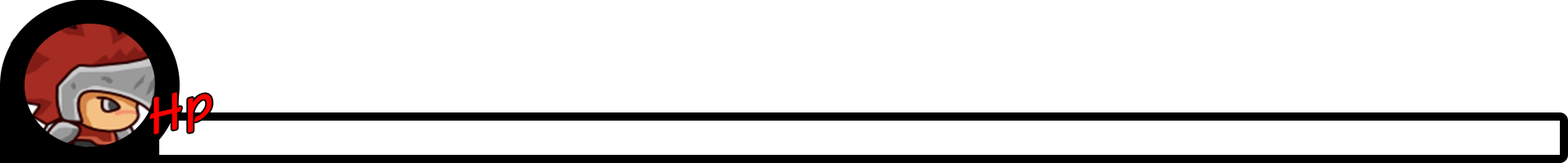
<style>
.page{position:relative;width:1568px;height:163px;background:#ffffff}
.page>*{position:absolute;margin:0}
.t1{font:49px "H2porL";color:#ff0000;font-weight:bold}
</style>
<div class="page">
<p class="t1" style="left:149px;top:92px;width:63px;height:43px;rotate:-14deg">Hp</p>
</div>
